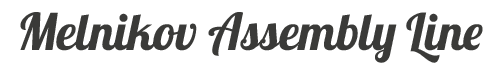
<style>
.page{position:relative;width:500px;height:72px;background:#ffffff}
.page>*{position:absolute;margin:0}
.t1{font:50.8px "Lobster";letter-spacing:-0.005em;color:#3a3a38}
</style>
<div class="page">
<p class="t1" style="left:20px;top:12px;width:463px;height:51px">Melnikov Assembly Line</p>
</div>
